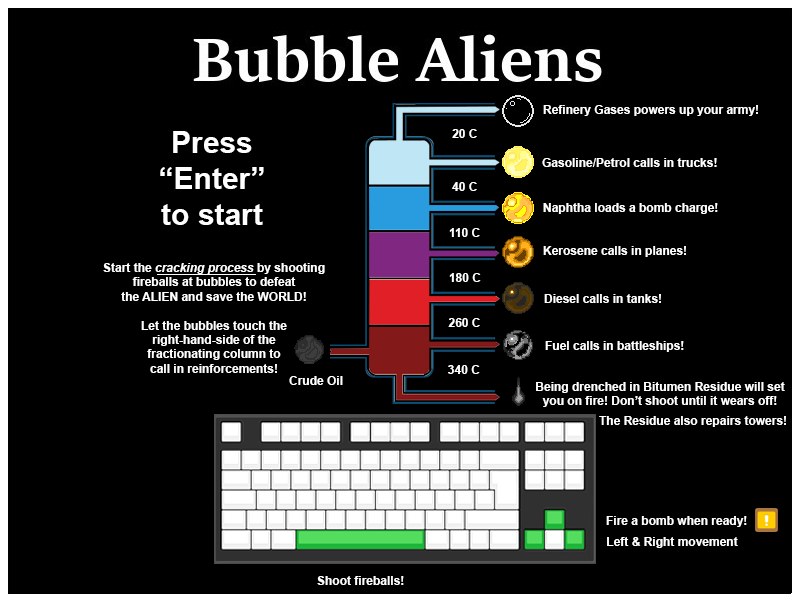
<style>
.page{position:relative;width:800px;height:600px;background:#000000}
.page>*{position:absolute;margin:0}
.t1{font:12px "Arial-BoldMT";color:#ffffff}
.t2{font:30px "Arial-BoldMT";color:#ffffff}
.t3{font:12px "Arial-BoldItalicMT";color:#ffffff}
</style>
<div class="page">
<p class="t1" style="left:543px;top:105px;width:215px;height:11px">Refinery Gases powers up your army!</p>
<p class="t2" style="left:160px;top:131px;width:104px;height:94px;text-align:center">Press<br>“Enter”<br>to start</p>
<p class="t1" style="left:452px;top:129px;width:25px;height:9px">20 C</p>
<p class="t1" style="left:542px;top:158px;width:175px;height:9px">Gasoline/Petrol calls in trucks!</p>
<p class="t1" style="left:452px;top:182px;width:25px;height:9px">40 C</p>
<p class="t1" style="left:543px;top:203px;width:175px;height:11px">Naphtha loads a bomb charge!</p>
<p class="t1" style="left:449px;top:228px;width:31px;height:9px">110 C</p>
<p class="t1" style="left:543px;top:246px;width:143px;height:11px">Kerosene calls in planes!</p>
<p class="t1" style="left:103px;top:263px;width:222px;height:110px;text-align:center">Start the <span class="t3">cracking process</span> by shooting<br>fireballs at bubbles to defeat<br>the ALIEN and save the WORLD!<br><br>Let the bubbles touch the<br>right-hand-side of the<br>fractionating column to<br>call in reinforcements!</p>
<p class="t1" style="left:449px;top:273px;width:32px;height:9px">180 C</p>
<p class="t1" style="left:544px;top:294px;width:117px;height:9px">Diesel calls in tanks!</p>
<p class="t1" style="left:448px;top:318px;width:32px;height:9px">260 C</p>
<p class="t1" style="left:545px;top:341px;width:139px;height:11px">Fuel calls in battleships!</p>
<p class="t1" style="left:448px;top:365px;width:32px;height:9px">340 C</p>
<p class="t1" style="left:289px;top:376px;width:54px;height:9px">Crude Oil</p>
<p class="t1" style="left:536px;top:382px;width:249px;height:25px;text-align:center">Being drenched in Bitumen Residue will set<br>you on fire! Don’t shoot until it wears off!</p>
<p class="t1" style="left:599px;top:416px;width:187px;height:11px">The Residue also repairs towers!</p>
<p class="t1" style="left:606px;top:516px;width:141px;height:11px">Fire a bomb when ready!</p>
<p class="t1" style="left:607px;top:537px;width:131px;height:11px">Left &amp; Right movement</p>
<p class="t1" style="left:317px;top:576px;width:87px;height:9px">Shoot fireballs!</p>
</div>
